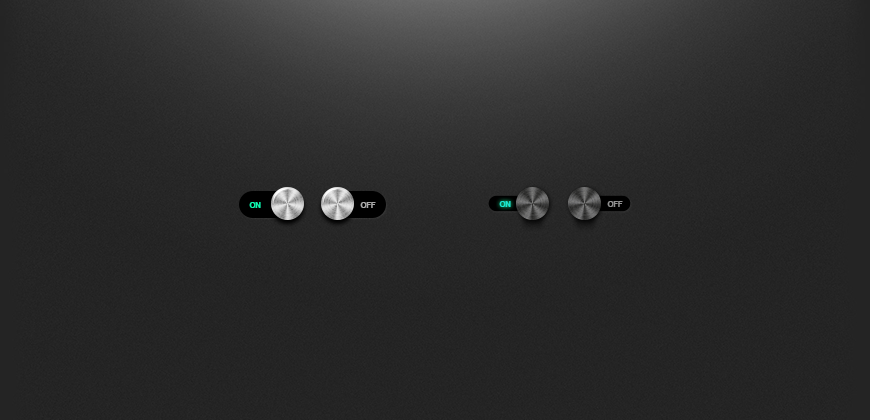
<style>
.page{position:relative;width:870px;height:420px}
.page>*{position:absolute;margin:0}
.t1{font:8px "Arial-BoldMT";letter-spacing:-0.05em;color:#10f6b0;text-transform:uppercase}
.t2{font:8px "Arial-BoldMT";letter-spacing:-0.05em;color:#a9a9a9;text-transform:uppercase}
.t3{font:8px "Arial-BoldMT";letter-spacing:-0.05em;color:#1ae6d0;text-transform:uppercase}
.t4{font:8px "Arial-BoldMT";letter-spacing:-0.05em;color:#909090;text-transform:uppercase}
</style>
<div class="page">
<p class="t1" style="left:249px;top:202px;width:12px;height:6px">on</p>
<p class="t2" style="left:360px;top:202px;width:16px;height:6px">OFF</p>
<p class="t3" style="left:499px;top:201px;width:12px;height:6px">on</p>
<p class="t4" style="left:607px;top:201px;width:16px;height:6px">off</p>
</div>
